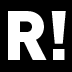
<style>
.page{position:relative;width:72px;height:72px;background:#000000}
.page>*{position:absolute;margin:0}
.t1{font:68px "DINOT-Black";color:#ffffff}
</style>
<div class="page">
<p class="t1" style="left:8px;top:11px;width:58px;height:49px">R!</p>
</div>
